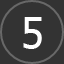
<style>
.page{position:relative;width:64px;height:64px;background:#333333}
.page>*{position:absolute;margin:0}
.t1{font:42px "Tahoma";color:#ffffff}
</style>
<div class="page">
<p class="t1" style="left:23px;top:17px;width:19px;height:32px">5</p>
</div>
